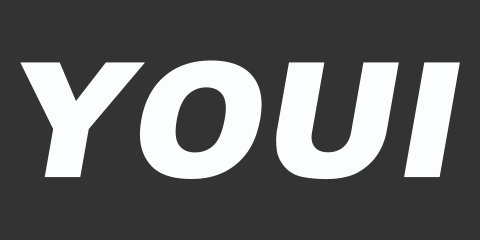
<style>
.page{position:relative;width:480px;height:240px;background:#333333}
.page>*{position:absolute;margin:0}
.t1{font:160px "Arial-Black";color:#fcfdfe;font-style:italic}
</style>
<div class="page">
<p class="t1" style="left:20px;top:60px;width:440px;height:120px">YOUI</p>
</div>
